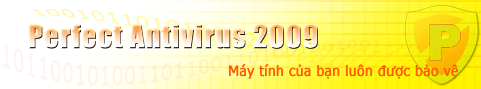
<style>
.page{position:relative;width:481px;height:89px}
.page>*{position:absolute;margin:0}
.t1{font:30px "Impact";font-weight:bold}
.t2{font:14px "Tahoma";color:#ff5a00;font-weight:bold}
</style>
<div class="page">
<p class="t1" style="left:29px;top:23px;width:289px;height:26px">Perfect Antivirus 2009</p>
<p class="t2" style="left:229px;top:64px;width:229px;height:15px">Máy tính của bạn luôn được bảo vệ</p>
</div>
